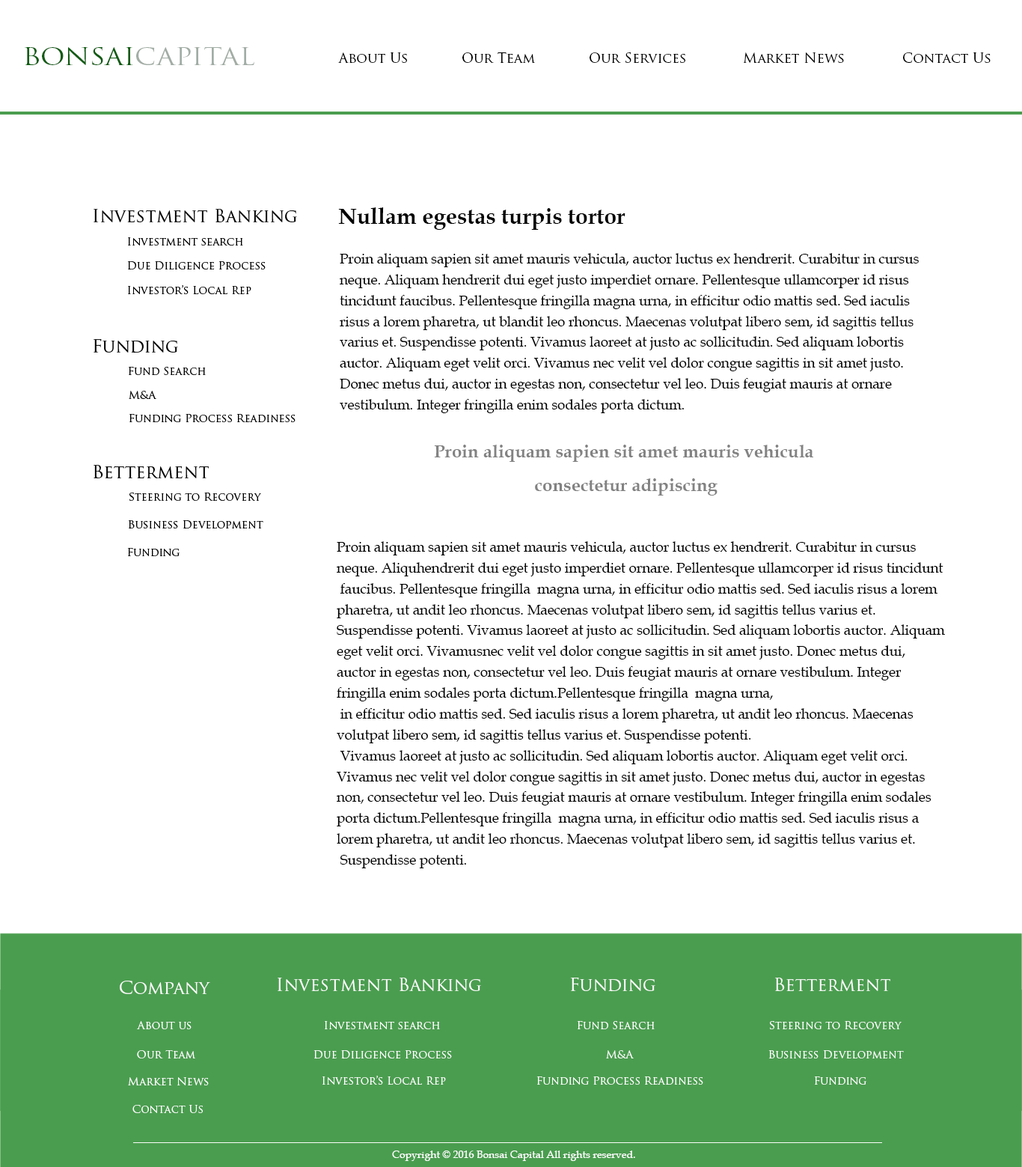
<style>
.page{position:relative;width:1022px;height:1167px;background:#ffffff}
.page>*{position:absolute;margin:0}
.t1{font:23.2px "TrajanPro-Regular";color:#a2ada5;scale:1.15 1}
.t2{font:23.2px "TrajanPro-Regular";color:#0e5c11;scale:1.15 1}
.t3{font:13.6px "TrajanPro-Regular";color:#000000}
.t4{font:18px "TrajanPro-Regular";color:#000000}
.t5{font:22.4px "BookAntiqua-Bold";color:#000000}
.t6{font:10.9px "TrajanPro-Regular";color:#000000}
.t7{font:13.9px/10.4px "BookAntiqua";color:#000000}
.t8{font:18px/11.2px "BookAntiqua-Bold";color:#828282}
.t9{font:18px "TrajanPro-Regular";color:#ffffff}
.t10{font:10.9px "TrajanPro-Regular";color:#ffffff}
.t11{font:10.5px "BookAntiqua";color:#ffffff}
</style>
<div class="page">
<p class="t1" style="left:25px;top:47px;width:229px;height:18px"><span class="t2">BONSAI</span>CAPITAL</p>
<p class="t3" style="left:338px;top:52px;width:69px;height:11px">About Us</p>
<p class="t3" style="left:462px;top:52px;width:73px;height:11px">Our Team</p>
<p class="t3" style="left:590px;top:52px;width:95px;height:11px">Our Services</p>
<p class="t3" style="left:743px;top:52px;width:101px;height:11px">Market News</p>
<p class="t3" style="left:903px;top:52px;width:88px;height:11px">Contact Us</p>
<p class="t4" style="left:94px;top:209px;width:203px;height:13px">Investment Banking</p>
<p class="t5" style="left:338px;top:207px;width:288px;height:23px">Nullam egestas turpis tortor</p>
<p class="t6" style="left:128px;top:237px;width:115px;height:8px">Investment search</p>
<p class="t7" style="left:340px;top:253px;width:579px;height:160px;text-align:right">Proin aliquam sapien sit amet mauris vehicula, auctor luctus ex hendrerit. Curabitur in cursus <br><br>neque. Aliquam hendrerit dui eget justo imperdiet ornare. Pellentesque ullamcorper id risus <br><br>tincidunt faucibus. Pellentesque fringilla magna urna, in efficitur odio mattis sed. Sed iaculis <br><br>risus a lorem pharetra, ut blandit leo rhoncus. Maecenas volutpat libero sem, id sagittis tellus <br><br>varius et. Suspendisse potenti. Vivamus laoreet at justo ac sollicitudin. Sed aliquam lobortis <br><br>auctor. Aliquam eget velit orci. Vivamus nec velit vel dolor congue sagittis in sit amet justo. <br><br>Donec metus dui, auctor in egestas non, consectetur vel leo. Duis feugiat mauris at ornare <br><br>vestibulum. Integer fringilla enim sodales porta dictum.</p>
<p class="t6" style="left:127px;top:261px;width:139px;height:9px">Due Diligence Process</p>
<p class="t6" style="left:128px;top:285px;width:123px;height:9px">Investor’s Local Rep</p>
<p class="t4" style="left:93px;top:339px;width:85px;height:14px">Funding</p>
<p class="t6" style="left:128px;top:367px;width:78px;height:8px">Fund Search</p>
<p class="t6" style="left:129px;top:391px;width:27px;height:8px">M&amp;A</p>
<p class="t6" style="left:129px;top:414px;width:167px;height:8px">Funding Process Readiness</p>
<p class="t8" style="left:434px;top:444px;width:379px;height:51px;text-align:center">Proin aliquam sapien sit amet mauris vehicula<br><br><br> consectetur adipiscing</p>
<p class="t4" style="left:94px;top:465px;width:115px;height:13px">Betterment</p>
<p class="t6" style="left:129px;top:492px;width:132px;height:9px">Steering to Recovery</p>
<p class="t6" style="left:128px;top:520px;width:135px;height:9px">Business Development</p>
<p class="t7" style="left:337px;top:541px;width:608px;height:327px;text-align:right">Proin aliquam sapien sit amet mauris vehicula, auctor luctus ex hendrerit. Curabitur in cursus <br><br>neque. Aliquhendrerit dui eget justo imperdiet ornare. Pellentesque ullamcorper id risus tincidunt<br><br> faucibus. Pellentesque fringilla  magna urna, in efficitur odio mattis sed. Sed iaculis risus a lorem <br><br>pharetra, ut andit leo rhoncus. Maecenas volutpat libero sem, id sagittis tellus varius et. <br><br>Suspendisse potenti. Vivamus laoreet at justo ac sollicitudin. Sed aliquam lobortis auctor. Aliquam <br><br>eget velit orci. Vivamusnec velit vel dolor congue sagittis in sit amet justo. Donec metus dui, <br><br>auctor in egestas non, consectetur vel leo. Duis feugiat mauris at ornare vestibulum. Integer <br><br>fringilla enim sodales porta dictum.Pellentesque fringilla  magna urna,<br><br> in efficitur odio mattis sed. Sed iaculis risus a lorem pharetra, ut andit leo rhoncus. Maecenas <br><br>volutpat libero sem, id sagittis tellus varius et. Suspendisse potenti.<br><br> Vivamus laoreet at justo ac sollicitudin. Sed aliquam lobortis auctor. Aliquam eget velit orci. <br><br>Vivamus nec velit vel dolor congue sagittis in sit amet justo. Donec metus dui, auctor in egestas <br><br>non, consectetur vel leo. Duis feugiat mauris at ornare vestibulum. Integer fringilla enim sodales <br><br>porta dictum.Pellentesque fringilla  magna urna, in efficitur odio mattis sed. Sed iaculis risus a <br><br>lorem pharetra, ut andit leo rhoncus. Maecenas volutpat libero sem, id sagittis tellus varius et.<br><br> Suspendisse potenti.</p>
<p class="t6" style="left:127px;top:548px;width:53px;height:8px">Funding</p>
<p class="t9" style="left:278px;top:977px;width:203px;height:14px">Investment Banking</p>
<p class="t9" style="left:570px;top:977px;width:85px;height:14px">Funding</p>
<p class="t9" style="left:775px;top:977px;width:115px;height:14px">Betterment</p>
<p class="t9" style="left:120px;top:980px;width:90px;height:14px">Company</p>
<p class="t10" style="left:137px;top:1021px;width:55px;height:8px">About us</p>
<p class="t10" style="left:325px;top:1021px;width:115px;height:8px">Investment search</p>
<p class="t10" style="left:577px;top:1021px;width:78px;height:8px">Fund Search</p>
<p class="t10" style="left:770px;top:1021px;width:132px;height:8px">Steering to Recovery</p>
<p class="t10" style="left:137px;top:1050px;width:58px;height:8px">Our Team</p>
<p class="t10" style="left:314px;top:1050px;width:138px;height:9px">Due Diligence Process</p>
<p class="t10" style="left:606px;top:1050px;width:28px;height:8px">M&amp;A</p>
<p class="t10" style="left:768px;top:1050px;width:136px;height:9px">Business Development</p>
<p class="t10" style="left:128px;top:1077px;width:81px;height:8px">Market News</p>
<p class="t10" style="left:323px;top:1075px;width:123px;height:9px">Investor’s Local Rep</p>
<p class="t10" style="left:537px;top:1076px;width:166px;height:8px">Funding Process Readiness</p>
<p class="t10" style="left:814px;top:1076px;width:53px;height:8px">Funding</p>
<p class="t10" style="left:132px;top:1104px;width:71px;height:9px">Contact Us</p>
<p class="t11" style="left:392px;top:1150px;width:243px;height:11px">Copyright © 2016 Bonsai Capital All rights reserved.</p>
</div>
